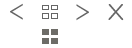
<style>
.page{position:relative;width:132px;height:48px;background:#ffffff}
.page>*{position:absolute;margin:0}
.t1{font:30px "Raleway-Light";color:#666666;text-transform:uppercase}
.t2{font:25px "Hero";color:#666666}
</style>
<div class="page">
<p class="t1" style="left:10px;top:3px;width:13px;height:17px">&lt;</p>
<p class="t1" style="left:76px;top:4px;width:13px;height:17px;rotate:180deg">&lt;</p>
<p class="t2" style="left:108px;top:4px;width:16px;height:17px">X</p>
</div>
